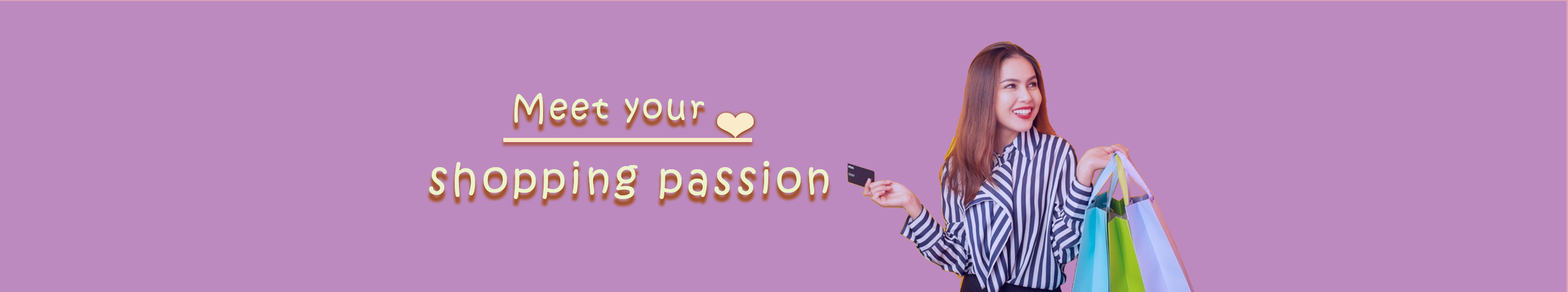
<style>
.page{position:relative;width:1568px;height:292px;background:#bd8abf}
.page>*{position:absolute;margin:0}
.t1{font:32.8px "KristenITC-Regular";letter-spacing:0.1em;color:#ecf3cb}
.t2{font:41.8px "KristenITC-Regular";letter-spacing:0.1em;color:#ecf3cb}
</style>
<div class="page">
<p class="t1" style="left:514px;top:93px;width:191px;height:31px">Meet your</p>
<p class="t1" style="left:514px;top:93px;width:191px;height:31px">Meet your</p>
<p class="t2" style="left:429px;top:161px;width:399px;height:38px">shopping passion</p>
<p class="t2" style="left:429px;top:161px;width:399px;height:38px">shopping passion</p>
</div>
